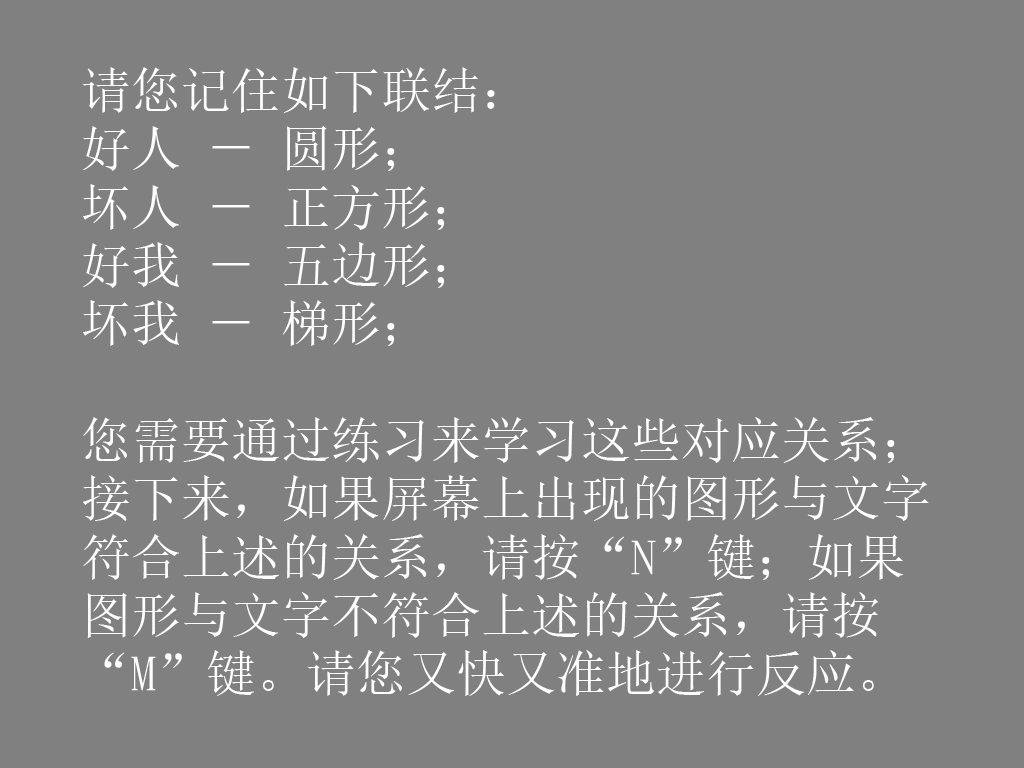
<style>
.page{position:relative;width:1024px;height:768px;background:#808080}
.page>*{position:absolute;margin:0}
.t1{font:50px/58.3px "SimSun";color:#ffffff}
</style>
<div class="page">
<p class="t1" style="left:82px;top:67px;width:847px;height:629px">请您记住如下联结： <br>好人 － 圆形；<br>坏人 － 正方形；<br>好我 － 五边形；<br>坏我 － 梯形；<br><br>您需要通过练习来学习这些对应关系；<br>接下来，如果屏幕上出现的图形与文字<br>符合上述的关系，请按“N”键；如果<br>图形与文字不符合上述的关系，请按<br>“M”键。请您又快又准地进行反应。</p>
</div>
